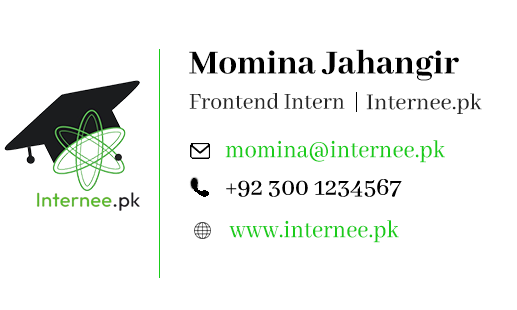
<style>
.page{position:relative;width:517px;height:310px;background:#ffffff}
.page>*{position:absolute;margin:0}
.t1{font:37.3px "AbhayaLibre-ExtraBold";color:#000000}
.t2{font:24.9px "AbhayaLibre-Medium";color:#262626;scale:0.95 1}
.t3{font:24.9px "AbhayaLibre-Medium";color:#262626}
.t4{font:26.7px "AbhayaLibre-Medium";color:#1acc1a;scale:0.92 1}
</style>
<div class="page">
<p class="t1" style="left:189px;top:49px;width:270px;height:32px">Momina Jahangir</p>
<p class="t2" style="left:189px;top:93px;width:156px;height:16px">Frontend Intern</p>
<p class="t3" style="left:366px;top:93px;width:116px;height:21px">Internee.pk</p>
<p class="t4" style="left:225px;top:140px;width:220px;height:23px">momina@internee.pk</p>
<p class="t4" style="left:229px;top:220px;width:170px;height:23px">www.internee.pk</p>
</div>
